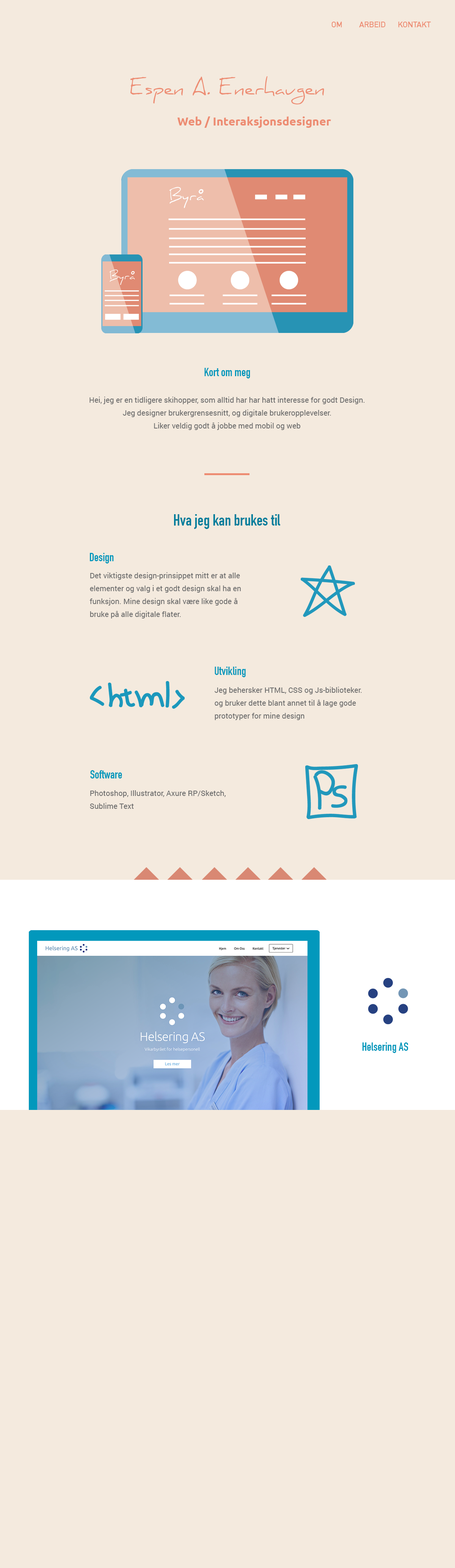
<style>
.page{position:relative;width:455px;height:1568px;background:#f4eade}
.page>*{position:absolute;margin:0}
.t1{font:8.1px "DINAlternate-Bold";color:#ed8c72}
.t2{font:19.7px "Daniel-Regular";color:#ed8c72}
.t3{font:11.8px "Ubuntu-Bold";color:#ed8c72}
.t4{font:11.8px "DINCondensed-Bold";color:#0298bc}
.t5{font:7.6px/12.9px "Roboto-Regular";color:#6c6c6c}
.t6{font:15.9px "DINCondensed-Bold";color:#037e9c}
</style>
<div class="page">
<p class="t1" style="left:331px;top:22px;width:11px;height:5px">OM</p>
<p class="t1" style="left:359px;top:22px;width:27px;height:5px">ARBEID</p>
<p class="t1" style="left:398px;top:22px;width:33px;height:5px">KONTAKT</p>
<p class="t2" style="left:130px;top:76px;width:194px;height:29px">Espen A. Enerhaugen</p>
<p class="t3" style="left:177px;top:116px;width:154px;height:12px">Web / Interaksjonsdesigner</p>
<p class="t4" style="left:204px;top:368px;width:46px;height:10px">Kort om meg</p>
<p class="t5" style="left:89px;top:397px;width:276px;height:33px;text-align:center">Hei, jeg er en tidligere skihopper, som alltid har har hatt interesse for godt Design.<br>Jeg designer brukergrensesnitt, og digitale brukeropplevelser.<br>Liker veldig godt å jobbe med mobil og web</p>
<p class="t6" style="left:174px;top:514px;width:106px;height:15px">Hva jeg kan brukes til</p>
<p class="t4" style="left:90px;top:553px;width:24px;height:10px">Design</p>
<p class="t5" style="left:89px;top:572px;width:152px;height:46px">Det viktigste design-prinsippet mitt er at alle elementer og valg i et godt design skal ha en funksjon. Mine design skal være like gode å bruke på alle digitale flater.</p>
<p class="t4" style="left:215px;top:667px;width:31px;height:10px">Utvikling</p>
<p class="t5" style="left:215px;top:687px;width:147px;height:33px">Jeg behersker HTML, CSS og Js-biblioteker. og bruker dette blant annet til å lage gode prototyper for mine design</p>
<p class="t4" style="left:90px;top:770px;width:32px;height:9px">Software</p>
<p class="t5" style="left:90px;top:790px;width:136px;height:19px">Photoshop, Illustrator, Axure RP/Sketch, Sublime Text</p>
<p class="t4" style="left:363px;top:1042px;width:45px;height:11px">Helsering AS</p>
</div>
